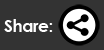
<style>
.page{position:relative;width:104px;height:50px;background:#333333}
.page>*{position:absolute;margin:0}
.t1{font:17px "CenturyGothic-Bold";letter-spacing:-0.025em;color:#ffffff}
</style>
<div class="page">
<p class="t1" style="left:4px;top:19px;width:49px;height:13px">Share:</p>
</div>
